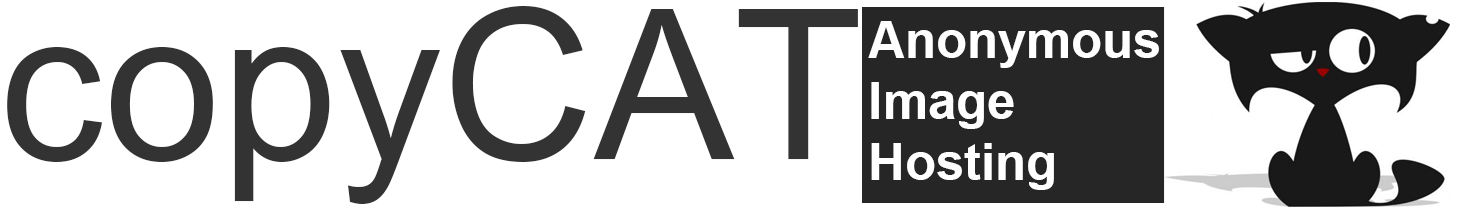
<style>
.page{position:relative;width:1458px;height:210px;background:#ffffff}
.page>*{position:absolute;margin:0}
.t1{font:293.3px "Utsaah";color:#333333}
.t2{font:50.7px "Arial-BoldMT";color:#ffffff}
</style>
<div class="page">
<p class="t1" style="left:7px;top:6px;width:851px;height:198px">copyCAT</p>
<p class="t2" style="left:868px;top:21px;width:291px;height:169px">Anonymous<br>Image<br>Hosting</p>
</div>
